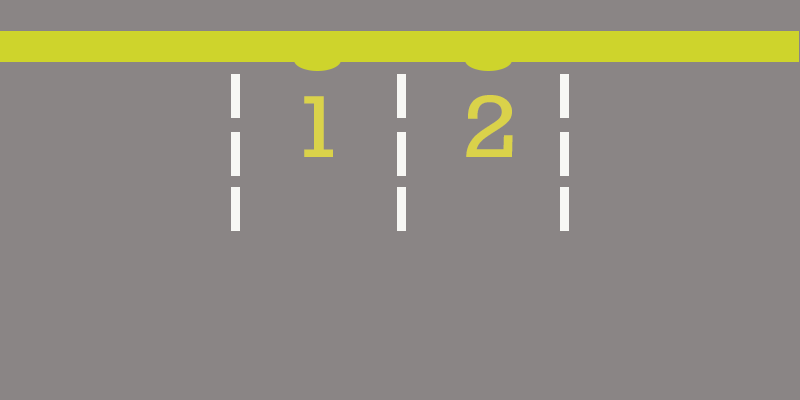
<style>
.page{position:relative;width:800px;height:400px;background:#8a8585}
.page>*{position:absolute;margin:0}
.t1{font:82.7px "Rockwell-Regular";color:#dad24a;scale:1.17 1}
</style>
<div class="page">
<p class="t1" style="left:304px;top:96px;width:29px;height:61px">1</p>
<p class="t1" style="left:466px;top:95px;width:47px;height:62px">2</p>
</div>
